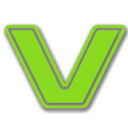
<style>
.page{position:relative;width:128px;height:128px;background:#ffffff}
.page>*{position:absolute;margin:0}
.t1{font:118.7px "FederationStarFleet";color:#8adb20}
</style>
<div class="page">
<p class="t1" style="left:5px;top:25px;width:120px;height:83px">V</p>
</div>
